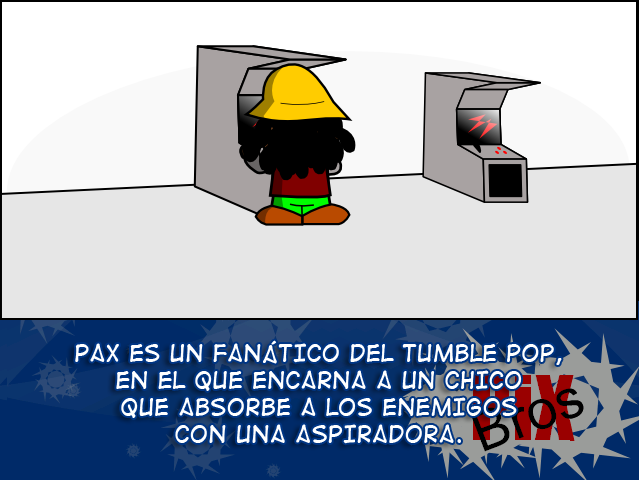
<style>
.page{position:relative;width:639px;height:480px;background:#e6e6e6}
.page>*{position:absolute;margin:0}
.t1{font:22.4px "DigitalStrip2";color:#ffffff}
</style>
<div class="page">
<p class="t1" style="left:75px;top:340px;width:487px;height:104px;text-align:center">PaX es un fanático del Tumble Pop,<br>en el que encarna a un chico <br>que absorbe a los enemigos <br>con una aspiradora.</p>
</div>
